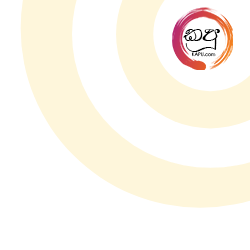
<style>
.page{position:relative;width:250px;height:250px;background:#ffffff}
.page>*{position:absolute;margin:0}
.t1{font:25.6px "FNNILANTHINormal";color:#000000}
.t2{font:4.7px "CenturyGothic"}
</style>
<div class="page">
<p class="t1" style="left:183px;top:29px;width:37px;height:23px">lmQ</p>
<p class="t2" style="left:192px;top:52px;width:24px;height:5px">KAPU.com</p>
</div>
